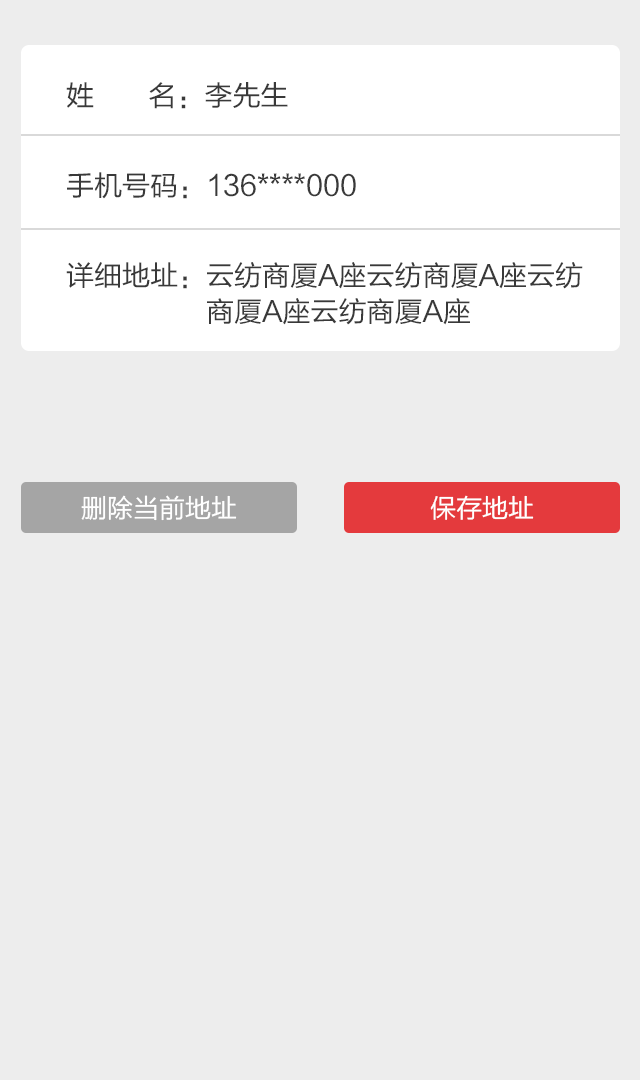
<style>
.page{position:relative;width:640px;height:1080px;background:#ededed}
.page>*{position:absolute;margin:0}
.t1{font:28px/36px "FZLTHJW--GB1-0";color:#393939}
.t2{font:28px/90px "FZLTHJW--GB1-0";color:#393939}
.t3{font:26px "FZLTHJW--GB1-0";color:#ffffff}
</style>
<div class="page">
<p class="t1" style="left:66px;top:82px;width:517px;height:243px"><span class="t2">姓       名：李先生 <br>手机号码：136****000<br>详细地址：</span>云纺商厦A座云纺商厦A座云纺<br>                  商厦A座云纺商厦A座</p>
<p class="t3" style="left:81px;top:495px;width:156px;height:26px">删除当前地址</p>
<p class="t3" style="left:430px;top:495px;width:104px;height:25px">保存地址</p>
</div>
